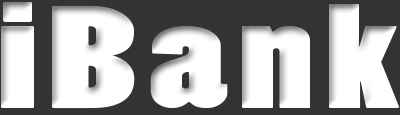
<style>
.page{position:relative;width:400px;height:115px;background:#333333}
.page>*{position:absolute;margin:0}
.t1{font:136px "PoplarStd";letter-spacing:0.05em;color:#ffffff;scale:1.5 1}
</style>
<div class="page">
<p class="t1" style="left:1px;top:2px;width:398px;height:107px">iBank</p>
</div>
